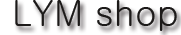
<style>
.page{position:relative;width:181px;height:35px;background:#ffffff}
.page>*{position:absolute;margin:0}
.t1{font:36px "Gulim";color:#1c1a19}
</style>
<div class="page">
<p class="t1" style="left:15px;top:0px;width:162px;height:31px">LYM shop</p>
</div>
